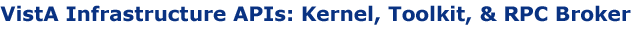
<style>
.page{position:relative;width:634px;height:29px;background:#ffffff}
.page>*{position:absolute;margin:0}
.t1{font:20px "Verdana-Bold";color:#093282}
.t2{font:26px "Impact";color:#093282}
</style>
<div class="page">
<p class="t1" style="left:0px;top:5px;width:631px;height:20px"><span class="t2">                                              </span>VistA Infrastructure APIs: Kernel, Toolkit, &amp; RPC Broker</p>
</div>
